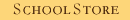
<style>
.page{position:relative;width:130px;height:20px;background:#fdd679}
.page>*{position:absolute;margin:0}
.t1{font:12.5px "Garamond";color:#4c290d}
.t2{font:16.7px "Garamond";color:#4c290d}
</style>
<div class="page">
<p class="t1" style="left:13px;top:3px;width:106px;height:12px"><span class="t2">S  </span>C H O O L <span class="t2">S  </span>T O R E</p>
</div>
